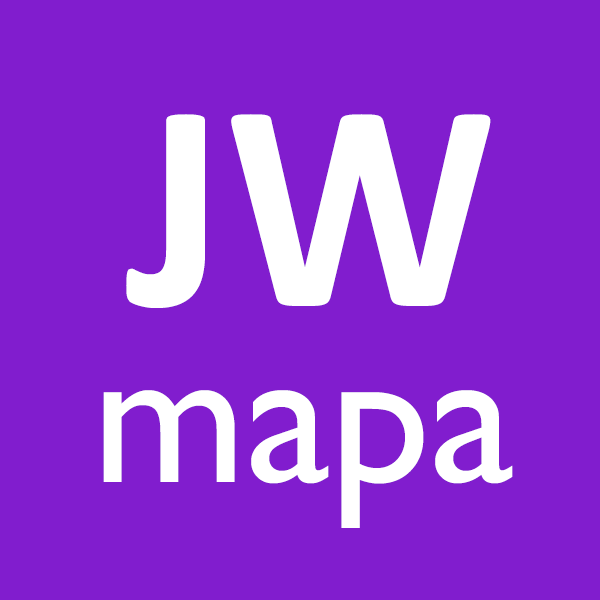
<style>
.page{position:relative;width:600px;height:600px;background:#811dce}
.page>*{position:absolute;margin:0}
.t1{font:300px "Calibri-Bold";color:#ffffff}
.t2{font:200px "GillSansMT";color:#ffffff}
</style>
<div class="page">
<p class="t1" style="left:126px;top:114px;width:365px;height:194px">JW</p>
<p class="t2" style="left:103px;top:390px;width:410px;height:138px">mapa</p>
</div>
